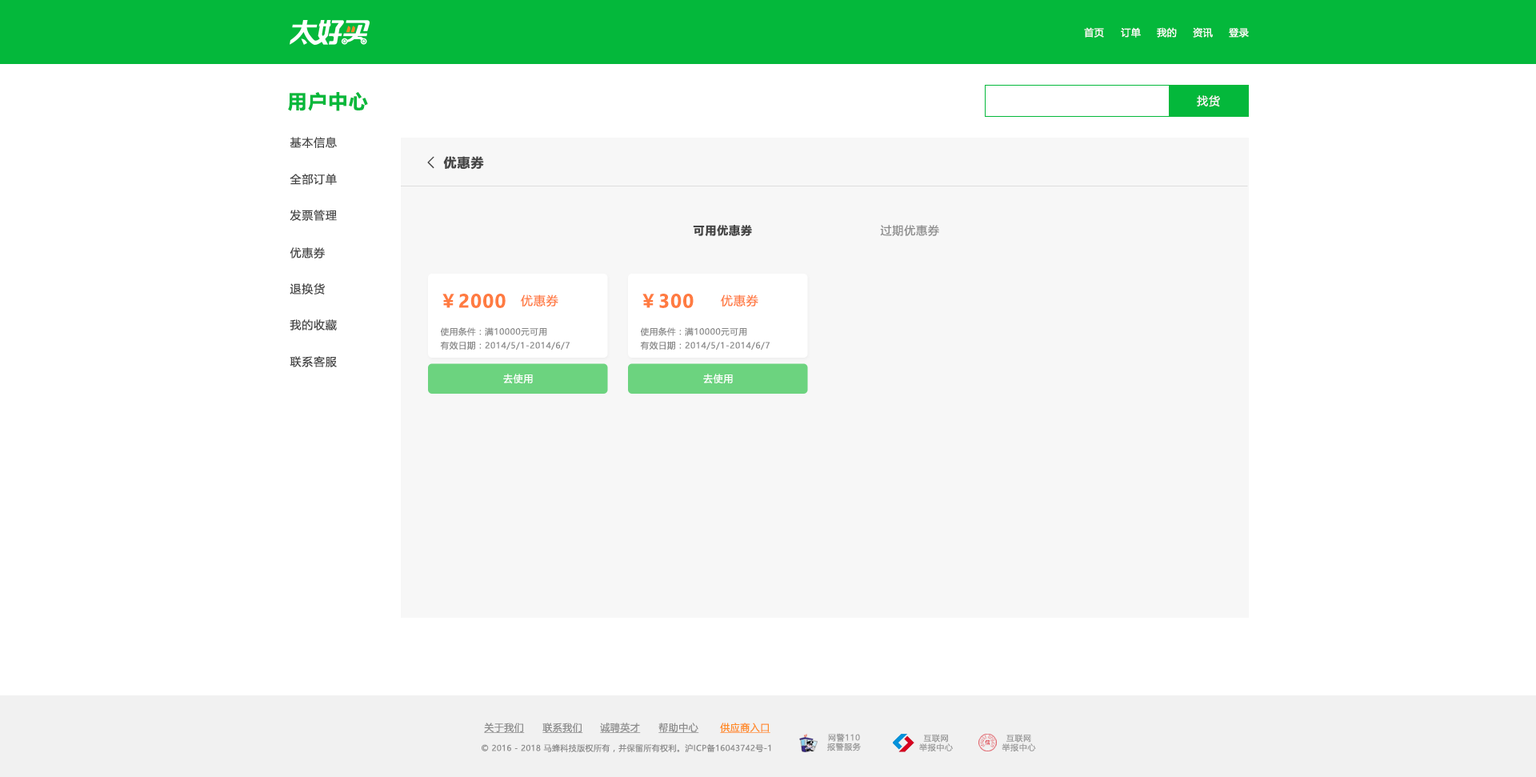
<style>
.page{position:relative;width:1536px;height:777px;background:#ffffff}
.page>*{position:absolute;margin:0}
.t1{font:9.6px "MicrosoftYaHeiUI";letter-spacing:0.04em;color:#ffffff}
.t2{font:19.2px "MicrosoftYaHeiUI-Bold";letter-spacing:0.06em;color:#04b83b}
.t3{font:11.2px "MicrosoftYaHei";letter-spacing:0.06em;color:#f7f7f7}
.t4{font:11.2px "MicrosoftYaHeiUI";letter-spacing:0.06em;color:#444444}
.t5{font:16px "FangSong";color:#444444;font-weight:bold}
.t6{font:12.8px "MicrosoftYaHeiUI-Bold";letter-spacing:0.06em;color:#444444}
.t7{font:11.2px "MicrosoftYaHeiUI-Bold";letter-spacing:0.06em;color:#444444}
.t8{font:11.2px "MicrosoftYaHeiUI";letter-spacing:0.06em;color:#8c8c8c}
.t9{font:18px "MicrosoftYaHei-Bold";letter-spacing:0.06em;color:#ff7b41}
.t10{font:12px "MicrosoftYaHei";letter-spacing:0.06em;color:#ff7b41}
.t11{font:8.4px "MicrosoftYaHei";letter-spacing:0.06em;color:#888888}
.t12{font:9.6px "MicrosoftYaHei";letter-spacing:0.06em;color:#ffffff}
.t13{font:9.6px "MicrosoftYaHeiUI";letter-spacing:0.04em;color:#8c8c8c;text-decoration:underline}
.t14{font:9.6px "MicrosoftYaHeiUI";letter-spacing:0.04em;color:#ff8b25;text-decoration:underline}
.t15{font:8px/9.3px "MicrosoftYaHei";letter-spacing:0.06em;color:#999999}
.t16{font:8px "MicrosoftYaHeiUI";letter-spacing:0.04em;color:#8c8c8c}
</style>
<div class="page">
<p class="t1" style="left:1084px;top:27px;width:20px;height:11px">首页</p>
<p class="t1" style="left:1120px;top:27px;width:20px;height:11px">订单</p>
<p class="t1" style="left:1156px;top:27px;width:20px;height:11px">我的</p>
<p class="t1" style="left:1192px;top:27px;width:20px;height:11px">资讯</p>
<p class="t1" style="left:1228px;top:28px;width:20px;height:10px">登录</p>
<p class="t2" style="left:288px;top:92px;width:80px;height:19px">用户中心</p>
<p class="t3" style="left:1196px;top:95px;width:24px;height:12px">找货</p>
<p class="t4" style="left:290px;top:137px;width:47px;height:11px">基本信息</p>
<p class="t5" style="left:427px;top:156px;width:7px;height:13px">&lt;</p>
<p class="t6" style="left:443px;top:156px;width:41px;height:14px">优惠券</p>
<p class="t4" style="left:290px;top:174px;width:47px;height:11px">全部订单</p>
<p class="t4" style="left:290px;top:210px;width:47px;height:11px">发票管理</p>
<p class="t7" style="left:693px;top:225px;width:59px;height:11px">可用优惠券</p>
<p class="t8" style="left:880px;top:225px;width:59px;height:11px">过期优惠券</p>
<p class="t4" style="left:290px;top:247px;width:35px;height:11px">优惠券</p>
<p class="t4" style="left:290px;top:283px;width:35px;height:11px">退换货</p>
<p class="t9" style="left:442px;top:294px;width:63px;height:14px">￥2000</p>
<p class="t9" style="left:642px;top:294px;width:51px;height:14px">￥300</p>
<p class="t10" style="left:521px;top:294px;width:37px;height:13px">优惠券</p>
<p class="t10" style="left:721px;top:294px;width:37px;height:13px">优惠券</p>
<p class="t4" style="left:290px;top:319px;width:47px;height:11px">我的收藏</p>
<p class="t11" style="left:440px;top:327px;width:107px;height:9px">使用条件：满10000元可用</p>
<p class="t11" style="left:640px;top:327px;width:107px;height:9px">使用条件：满10000元可用</p>
<p class="t11" style="left:440px;top:341px;width:129px;height:8px">有效日期：2014/5/1-2014/6/7</p>
<p class="t11" style="left:640px;top:341px;width:129px;height:8px">有效日期：2014/5/1-2014/6/7</p>
<p class="t4" style="left:290px;top:356px;width:47px;height:11px">联系客服</p>
<p class="t12" style="left:503px;top:373px;width:30px;height:11px">去使用</p>
<p class="t12" style="left:703px;top:373px;width:30px;height:11px">去使用</p>
<p class="t13" style="left:484px;top:722px;width:41px;height:11px">关于我们</p>
<p class="t13" style="left:542px;top:722px;width:41px;height:11px">联系我们</p>
<p class="t13" style="left:600px;top:722px;width:41px;height:11px">诚聘英才</p>
<p class="t13" style="left:658px;top:722px;width:41px;height:11px">帮助中心</p>
<p class="t14" style="left:720px;top:722px;width:50px;height:11px">供应商入口</p>
<p class="t15" style="left:827px;top:733px;width:34px;height:18px;text-align:center">网警110<br>报警服务</p>
<p class="t15" style="left:919px;top:733px;width:34px;height:18px;text-align:center">互联网<br>举报中心</p>
<p class="t15" style="left:1001px;top:733px;width:35px;height:18px;text-align:center">互联网<br>举报中心</p>
<p class="t16" style="left:481px;top:743px;width:290px;height:9px">© 2016 - 2018 马蜂科技版权所有，并保留所有权利。沪ICP备16043742号-1</p>
</div>
